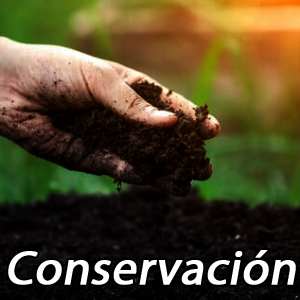
<style>
.page{position:relative;width:300px;height:300px}
.page>*{position:absolute;margin:0}
.t1{font:48.6px "MyriadPro-Regular";color:#ffffff;font-weight:bold;font-style:italic}
</style>
<div class="page">
<p class="t1" style="left:8px;top:250px;width:288px;height:35px">Conservación</p>
</div>
